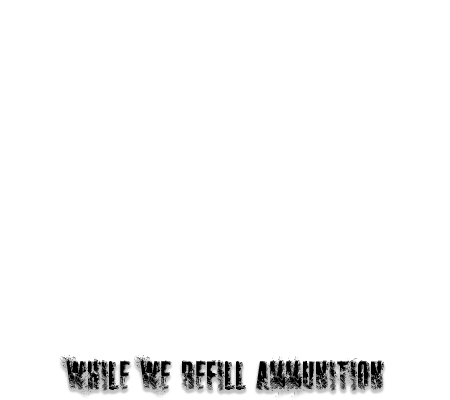
<style>
.page{position:relative;width:450px;height:400px;background:#ffffff}
.page>*{position:absolute;margin:0}
.t1{font:42px "SNIPER";color:#000000}
</style>
<div class="page">
<p class="t1" style="left:60px;top:355px;width:324px;height:42px">While we refill ammunition</p>
</div>
